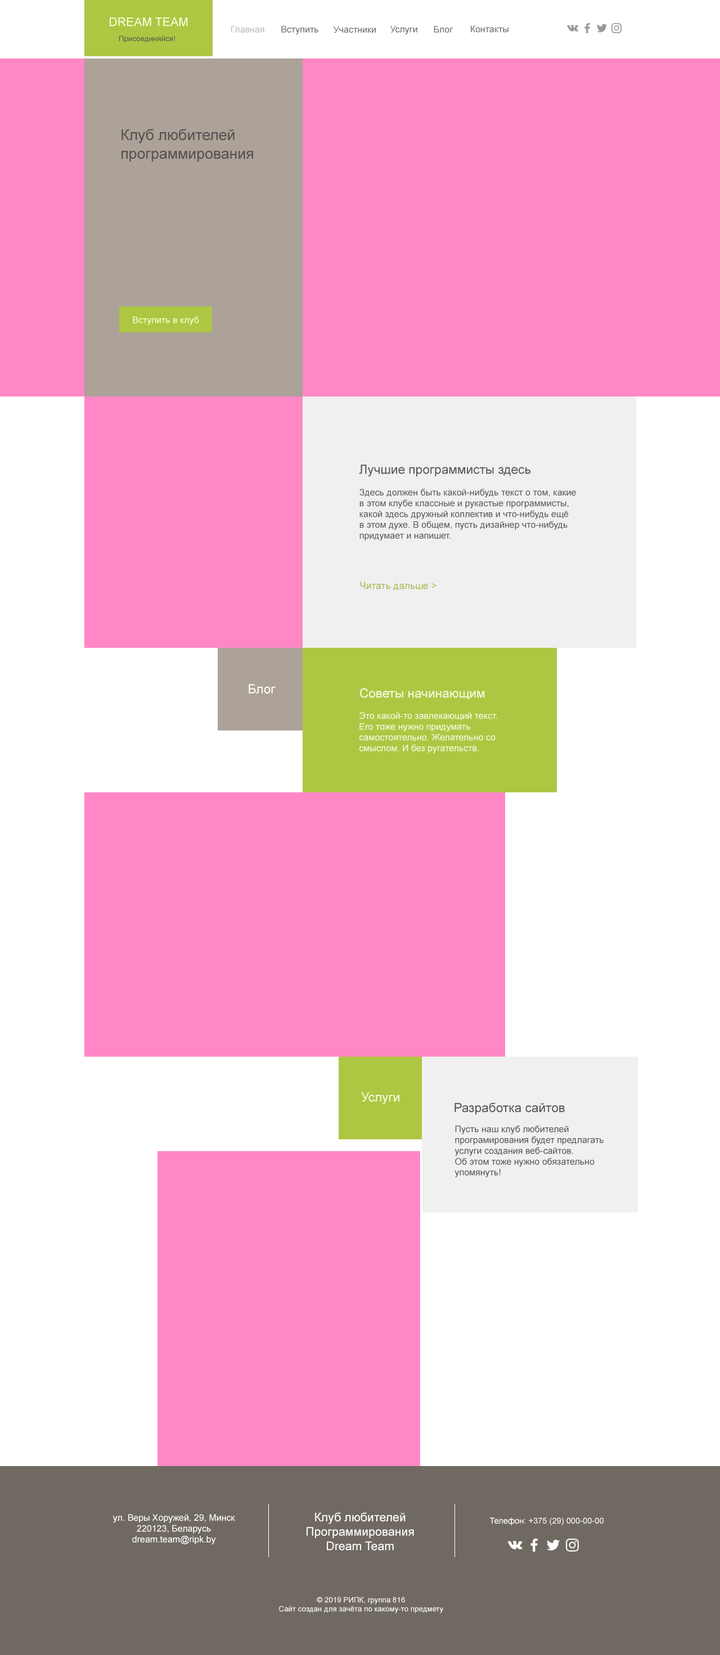
<style>
.page{position:relative;width:720px;height:1655px;background:#ff87c5}
.page>*{position:absolute;margin:0}
.t1{font:12px "ArialMT";color:#fcffdf}
.t2{font:9px "ArialMT";color:#bdbdbd}
.t3{font:9px "ArialMT";color:#6d6666}
.t4{font:7.5px "ArialMT";color:#53554b}
.t5{font:15px/18.7px "ArialMT";color:#575352}
.t6{font:9px "ArialMT";color:#faffcd}
.t7{font:12.8px "ArialMT";color:#5a5859}
.t8{font:9px "ArialMT";color:#5a5859}
.t9{font:9.7px "ArialMT";color:#a6bb4c}
.t10{font:12.8px "ArialMT";color:#fffef9}
.t11{font:12.8px "ArialMT";color:#f9fbe2}
.t12{font:9px "ArialMT";color:#f9fbe2}
.t13{font:12.8px "ArialMT";color:#545454}
.t14{font:9px "ArialMT";color:#545454}
.t15{font:9px "ArialMT";color:#ffffff}
.t16{font:12px "ArialMT";color:#ffffff}
.t17{font:8.3px "ArialMT";color:#ffffff}
.t18{font:7.5px "ArialMT";color:#ffffff}
</style>
<div class="page">
<p class="t1" style="left:110px;top:17px;width:78px;height:9px">DREAM TEAM</p>
<p class="t2" style="left:231px;top:26px;width:33px;height:7px">Главная</p>
<p class="t3" style="left:281px;top:26px;width:37px;height:9px">Вступить</p>
<p class="t3" style="left:334px;top:26px;width:42px;height:7px">Участники</p>
<p class="t3" style="left:390px;top:26px;width:27px;height:8px">Услуги</p>
<p class="t3" style="left:434px;top:26px;width:19px;height:7px">Блог</p>
<p class="t3" style="left:471px;top:25px;width:37px;height:8px">Контакты</p>
<p class="t4" style="left:119px;top:35px;width:56px;height:8px">Присоединяйся!</p>
<p class="t5" style="left:122px;top:129px;width:131px;height:33px">Клуб любителей<br>программирования</p>
<p class="t6" style="left:133px;top:316px;width:66px;height:9px">Вступить в клуб</p>
<p class="t7" style="left:359px;top:465px;width:172px;height:12px">Лучшие программисты здесь</p>
<p class="t8" style="left:359px;top:489px;width:217px;height:52px">Здесь должен быть какой-нибудь текст о том, какие<br>в этом клубе классные и рукастые программисты,<br>какой здесь дружный коллектив и что-нибудь ещё<br>в этом духе. В общем, пусть дизайнер что-нибудь<br>придумает и напишет.</p>
<p class="t9" style="left:360px;top:582px;width:76px;height:9px">Читать дальше &gt;</p>
<p class="t10" style="left:249px;top:684px;width:27px;height:10px">Блог</p>
<p class="t11" style="left:360px;top:688px;width:125px;height:12px">Советы начинающим</p>
<p class="t12" style="left:359px;top:712px;width:138px;height:42px">Это какой-то завлекающий текст. <br>Его тоже нужно придумать <br>самостоятельно. Желательно со <br>смыслом. И без ругательств.</p>
<p class="t11" style="left:361px;top:1092px;width:38px;height:13px">Услуги</p>
<p class="t13" style="left:454px;top:1103px;width:111px;height:12px">Разработка сайтов</p>
<p class="t14" style="left:454px;top:1126px;width:150px;height:52px">Пусть наш клуб любителей<br>програмирования будет предлагать<br>услуги создания веб-сайтов.<br>Об этом тоже нужно обязательно<br>упомянуть!</p>
<p class="t15" style="left:112px;top:1514px;width:123px;height:31px;text-align:center">ул. Веры Хоружей, 29, Минск<br>220123, Беларусь<br>dream.team@ripk.by</p>
<p class="t16" style="left:307px;top:1513px;width:107px;height:38px;text-align:center">Клуб любителей<br>Программирования<br>Dream Team</p>
<p class="t17" style="left:489px;top:1518px;width:115px;height:8px">Телефон: +375 (29) 000-00-00</p>
<p class="t18" style="left:279px;top:1597px;width:164px;height:17px;text-align:center">© 2019 РИПК, группа 816<br>Сайт создан для зачёта по какому-то предмету</p>
</div>
